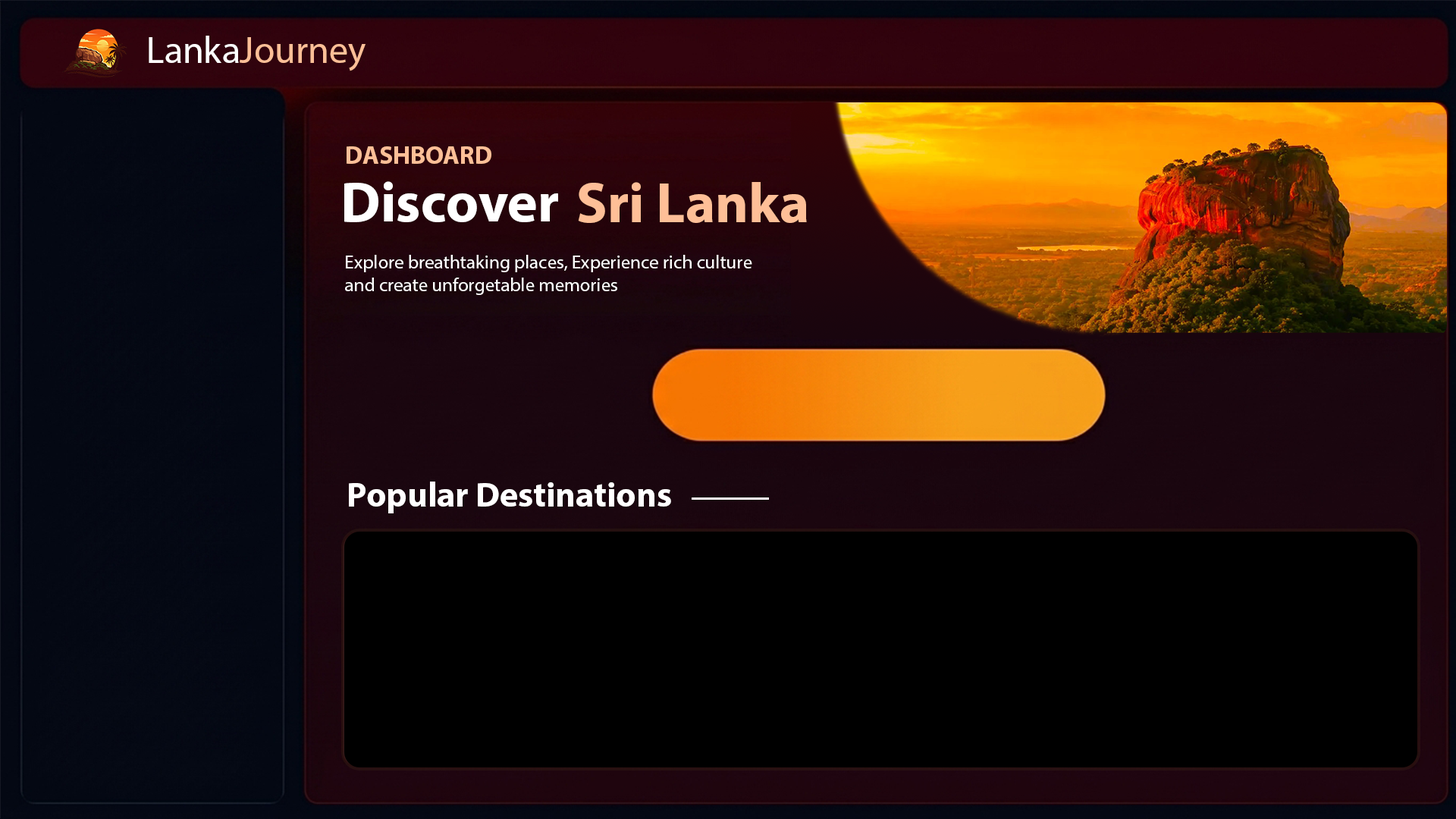
<style>
.page{position:relative;width:1456px;height:819px;background:#000000}
.page>*{position:absolute;margin:0}
.t1{font:37.9px "MyriadPro-Regular";color:#ffffff}
.t2{font:37.9px "MyriadPro-Regular";color:#febf97}
.t3{font:25.3px "MyriadPro-Bold";color:#febf97}
.t4{font:56.9px "MyriadPro-Bold";color:#ffffff}
.t5{font:56.9px "MyriadPro-Bold";color:#febf97}
.t6{font:19px "MyriadPro-Regular";color:#ffffff}
.t7{font:34.8px "MyriadPro-Bold";color:#ffffff}
</style>
<div class="page">
<p class="t1" style="left:149px;top:36px;width:90px;height:27px">Lanka</p>
<p class="t2" style="left:240px;top:37px;width:126px;height:34px">Journey</p>
<p class="t3" style="left:347px;top:146px;width:144px;height:18px">DASHBOARD</p>
<p class="t4" style="left:344px;top:181px;width:214px;height:41px">Discover</p>
<p class="t5" style="left:578px;top:182px;width:229px;height:41px">Sri Lanka</p>
<p class="t6" style="left:345px;top:255px;width:407px;height:40px">Explore breathtaking places, Experience rich culture<br>and create unforgetable memories</p>
<p class="t7" style="left:349px;top:482px;width:322px;height:31px">Popular Destinations</p>
</div>
